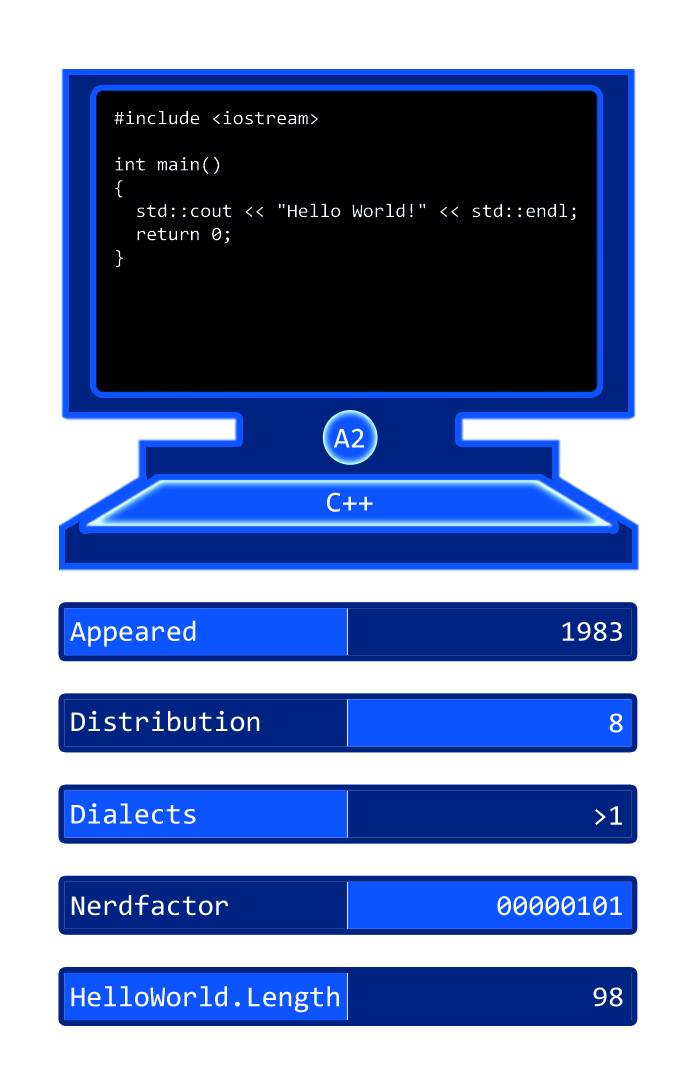
<style>
.page{position:relative;width:697px;height:1087px;background:#ffffff}
.page>*{position:absolute;margin:0}
.t1{font:19.3px "Consolas";color:#ffffff}
.t2{font:29px "Consolas";color:#ffffff}
</style>
<div class="page">
<p class="t1" style="left:114px;top:110px;width:462px;height:158px">#include &lt;iostream&gt;<br> <br>int main()<br>{<br>  std::cout &lt;&lt; "Hello World!" &lt;&lt; std::endl;<br>  return 0;<br>}</p>
<p class="t2" style="left:334px;top:428px;width:30px;height:20px">A2</p>
<p class="t2" style="left:327px;top:492px;width:46px;height:20px">C++</p>
<p class="t2" style="left:70px;top:620px;width:126px;height:27px">Appeared</p>
<p class="t2" style="left:562px;top:622px;width:60px;height:19px">1983</p>
<p class="t2" style="left:71px;top:710px;width:189px;height:22px">Distribution</p>
<p class="t2" style="left:609px;top:713px;width:14px;height:20px">8</p>
<p class="t2" style="left:71px;top:803px;width:125px;height:21px">Dialects</p>
<p class="t2" style="left:595px;top:806px;width:27px;height:19px">&gt;1</p>
<p class="t2" style="left:71px;top:894px;width:157px;height:22px">Nerdfactor</p>
<p class="t2" style="left:497px;top:896px;width:125px;height:20px">00000101</p>
<p class="t2" style="left:71px;top:986px;width:268px;height:27px">HelloWorld.Length</p>
<p class="t2" style="left:593px;top:987px;width:30px;height:20px">98</p>
</div>
